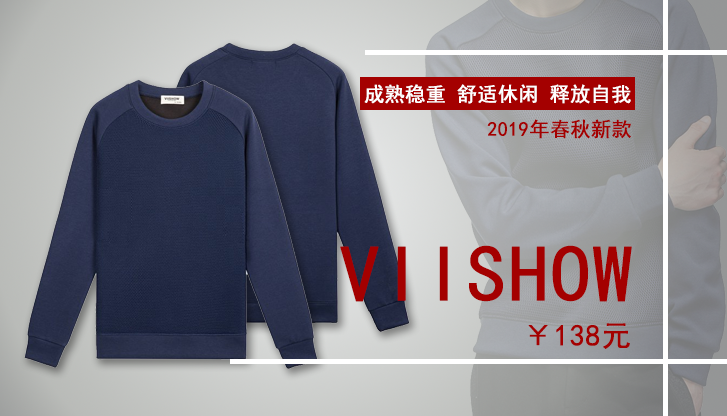
<style>
.page{position:relative;width:727px;height:416px}
.page>*{position:absolute;margin:0}
.t1{font:20px "SimHei";color:#fffefe;font-weight:bold}
.t2{font:20px "SimHei";color:#a40000;font-weight:bold}
.t3{font:80px "SimHei";color:#a40000;font-weight:bold}
.t4{font:30px "SimHei";color:#a40000;font-weight:bold}
</style>
<div class="page">
<p class="t1" style="left:364px;top:84px;width:267px;height:20px">成熟稳重 舒适休闲 释放自我</p>
<p class="t2" style="left:487px;top:119px;width:144px;height:20px">2019年春秋新款</p>
<p class="t3" style="left:340px;top:245px;width:292px;height:57px">VIISHOW</p>
<p class="t4" style="left:528px;top:323px;width:102px;height:26px">￥138元</p>
</div>
